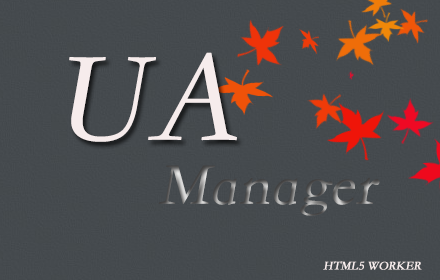
<style>
.page{position:relative;width:440px;height:280px;background:#454a4e}
.page>*{position:absolute;margin:0}
.t1{font:130px "STFangsong";color:#f6ecec;font-weight:bold;font-style:italic}
.t2{font:60px "STFangsong";font-weight:bold;font-style:italic}
.t3{font:12px "STFangsong";color:#f6ecec;font-weight:bold;font-style:italic}
</style>
<div class="page">
<p class="t1" style="left:69px;top:52px;width:168px;height:90px">UA</p>
<p class="t2" style="left:158px;top:165px;width:222px;height:51px">Manager</p>
<p class="t3" style="left:323px;top:261px;width:99px;height:9px">HTML5 WORKER</p>
</div>
